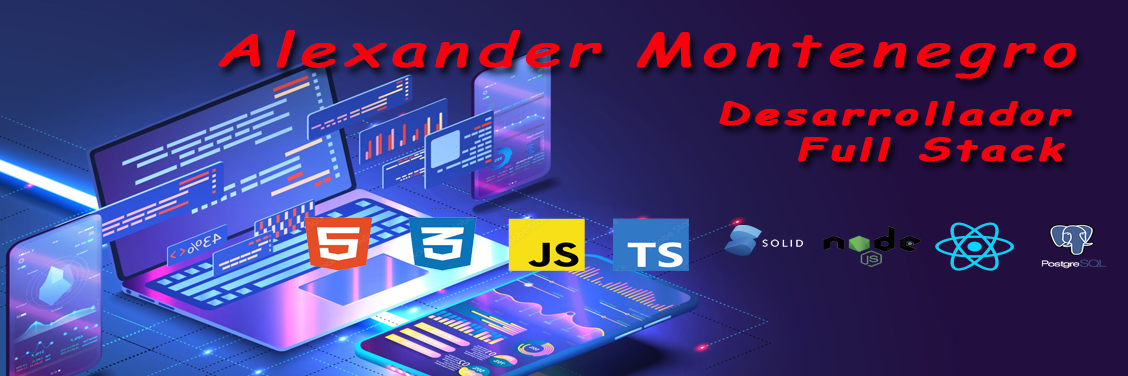
<style>
.page{position:relative;width:1128px;height:376px}
.page>*{position:absolute;margin:0}
.t1{font:44.9px "ComicSansMS";letter-spacing:0.1em;color:#fa000c;font-weight:bold;font-style:italic;scale:1.46 1}
.t2{font:29.9px "ComicSansMS-Bold";letter-spacing:0.1em;color:#fa000c;font-weight:bold;font-style:italic;scale:1.46 1}
</style>
<div class="page">
<p class="t1" style="left:218px;top:30px;width:858px;height:49px">Alexander Montenegro</p>
<p class="t2" style="left:719px;top:101px;width:353px;height:61px;text-align:center">Desarrollador <br>  Full Stack</p>
</div>
